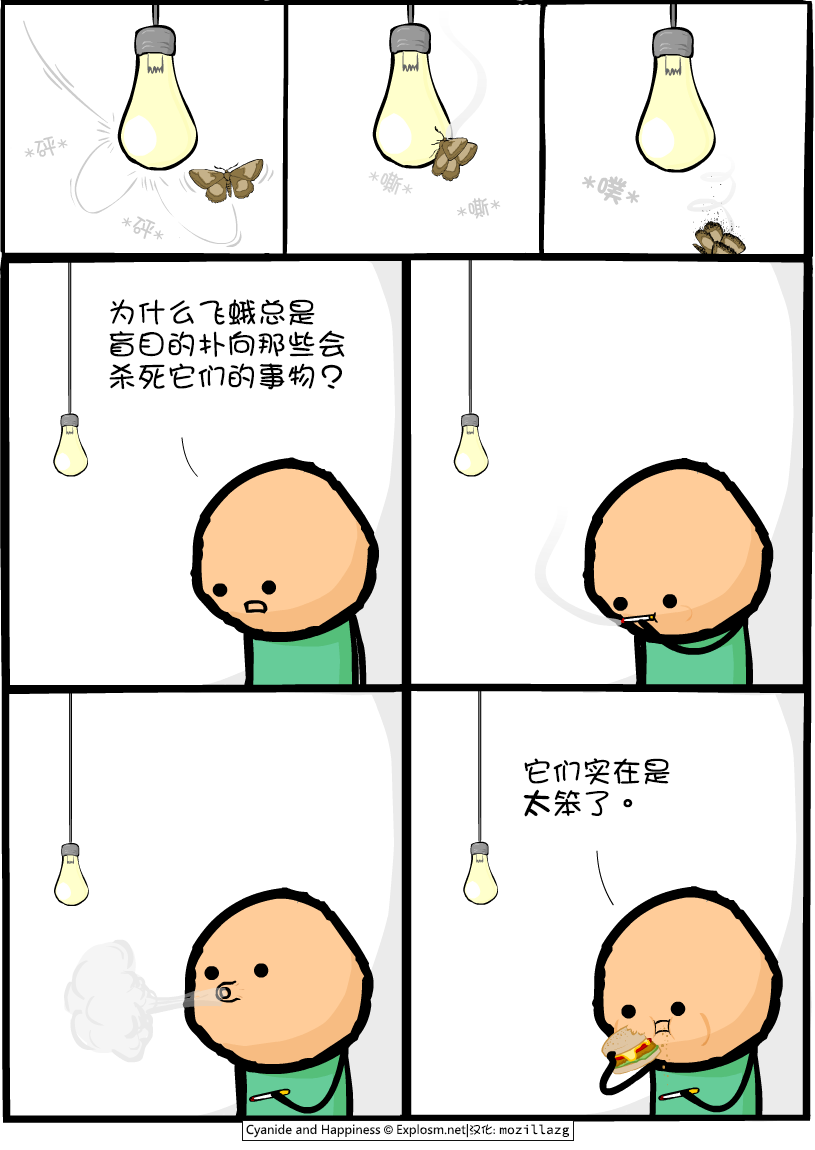
<style>
.page{position:relative;width:815px;height:1150px;background:#ffffff}
.page>*{position:absolute;margin:0}
.t1{font:23px "DFGirl";color:#cccccc}
.t2{font:24px "DFGirl";color:#d5d5d5}
.t3{font:30px "DFGirl";color:#cccccc;font-weight:bold}
.t4{font:30px/32px "DFGirl";color:#000000}
.t5{font:30px/32px "DFGirl";color:#000000;font-weight:bold}
</style>
<div class="page">
<p class="t1" style="left:24px;top:136px;width:44px;height:22px;rotate:-15deg">*砰*</p>
<p class="t2" style="left:368px;top:171px;width:45px;height:24px;rotate:21deg">*嘶*</p>
<p class="t3" style="left:582px;top:175px;width:58px;height:30px;rotate:19deg">*噗*</p>
<p class="t1" style="left:457px;top:197px;width:44px;height:22px;rotate:-12deg">*嘶*</p>
<p class="t1" style="left:121px;top:216px;width:43px;height:24px;rotate:22deg">*砰*</p>
<p class="t4" style="left:109px;top:299px;width:236px;height:91px">为什么飞蛾总是<br>盲目的扑向那些会<br>杀死它们的事物？</p>
<p class="t4" style="left:523px;top:758px;width:147px;height:59px">它们实在是<br><span class="t5">太</span>笨了。</p>
</div>
